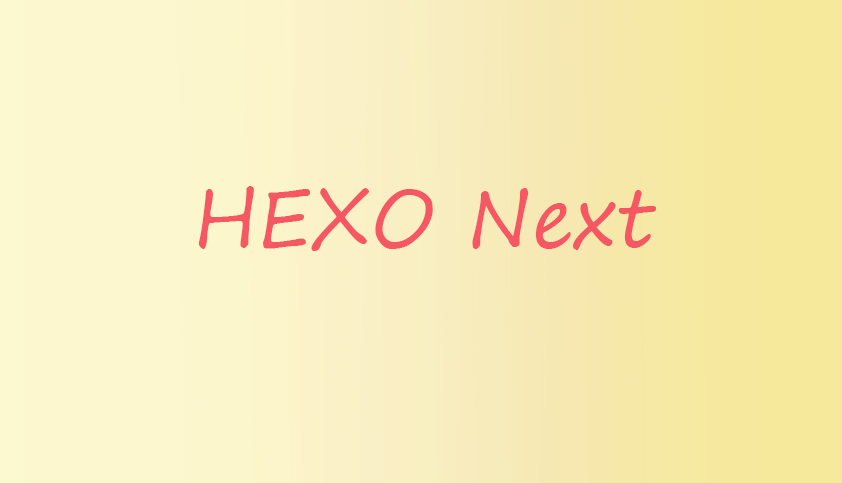
<style>
.page{position:relative;width:842px;height:483px}
.page>*{position:absolute;margin:0}
.t1{font:80px "SegoePrint";color:#f55863}
</style>
<div class="page">
<p class="t1" style="left:198px;top:186px;width:458px;height:65px">HEXO Next</p>
</div>
